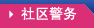
<style>
.page{position:relative;width:94px;height:28px;background:#da2e77}
.page>*{position:absolute;margin:0}
.t1{font:14px "SimHei";color:#ffffff}
</style>
<div class="page">
<p class="t1" style="left:21px;top:6px;width:56px;height:14px">社区警务</p>
</div>
